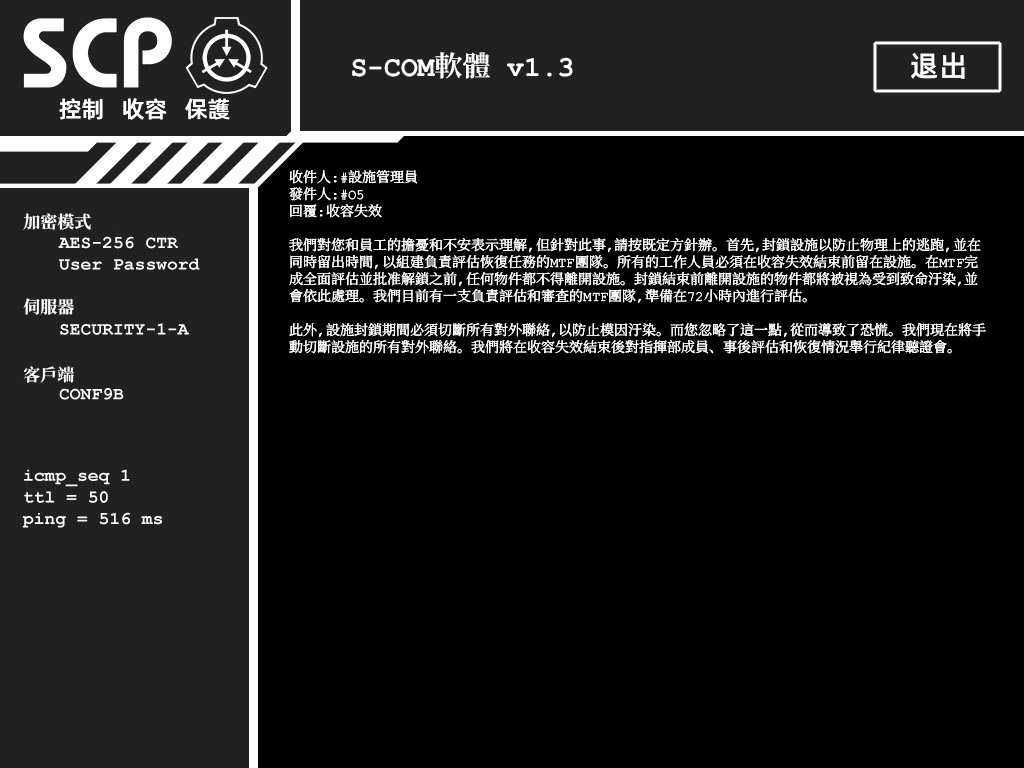
<style>
.page{position:relative;width:1024px;height:768px;background:#000000}
.page>*{position:absolute;margin:0}
.t1{font:28px "ContainmentBreach-Bold";color:#ffffff}
.t2{font:29px "AlibabaPuHuiTiM";color:#ffffff}
.t3{font:23px "AlibabaPuHuiTiM";color:#ffffff}
.t4{font:14px/17px "ContainmentBreach-Regular";color:#ffffff}
.t5{font:17px/17px "ContainmentBreach-Bold";color:#ffffff}
</style>
<div class="page">
<p class="t1" style="left:352px;top:52px;width:221px;height:27px">S-COM軟體 v1.3</p>
<p class="t2" style="left:911px;top:52px;width:54px;height:27px">退出</p>
<p class="t3" style="left:59px;top:98px;width:171px;height:22px">控制   收容   保護</p>
<p class="t4" style="left:289px;top:170px;width:697px;height:184px">收件人：#設施管理員<br>發件人：#O5<br>回覆：收容失效<br><br>我們對您和員工的擔憂和不安表示理解，但針對此事，請按既定方針辦。首先，封鎖設施以防止物理上的逃跑，並在<br>同時留出時間，以組建負責評估恢復任務的MTF團隊。所有的工作人員必須在收容失效結束前留在設施。在MTF完<br>成全面評估並批准解鎖之前，任何物件都不得離開設施。封鎖結束前離開設施的物件都將被視為受到致命汙染，並<br>會依此處理。我們目前有一支負責評估和審查的MTF團隊，準備在72小時內進行評估。<br><br>此外，設施封鎖期間必須切斷所有對外聯絡，以防止模因汙染。而您忽略了這一點，從而導致了恐慌。我們現在將手<br>動切斷設施的所有對外聯絡。我們將在收容失效結束後對指揮部成員、事後評估和恢復情況舉行紀律聽證會。</p>
<p class="t5" style="left:23px;top:213px;width:68px;height:170px">加密模式<br><br><br><br><br>伺服器<br><br><br><br>客戶端</p>
</div>
